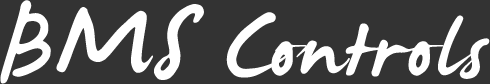
<style>
.page{position:relative;width:490px;height:84px;background:#333333}
.page>*{position:absolute;margin:0}
.t1{font:144px "JamesFajardo";color:#ffffff;font-weight:bold}
</style>
<div class="page">
<p class="t1" style="left:0px;top:0px;width:490px;height:84px">BMS Controls</p>
</div>
